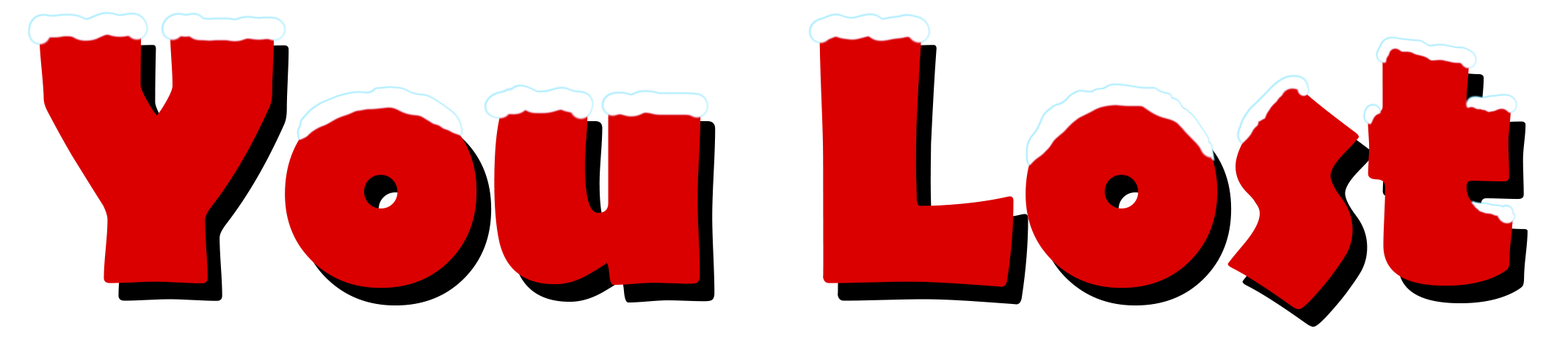
<style>
.page{position:relative;width:1568px;height:337px;background:#ffffff}
.page>*{position:absolute;margin:0}
.t1{font:372.9px "BerlinSansFB-Bold";color:#da0000}
</style>
<div class="page">
<p class="t1" style="left:39px;top:27px;width:1474px;height:282px">You Lost</p>
<p class="t1" style="left:54px;top:45px;width:1474px;height:282px">You Lost</p>
</div>
